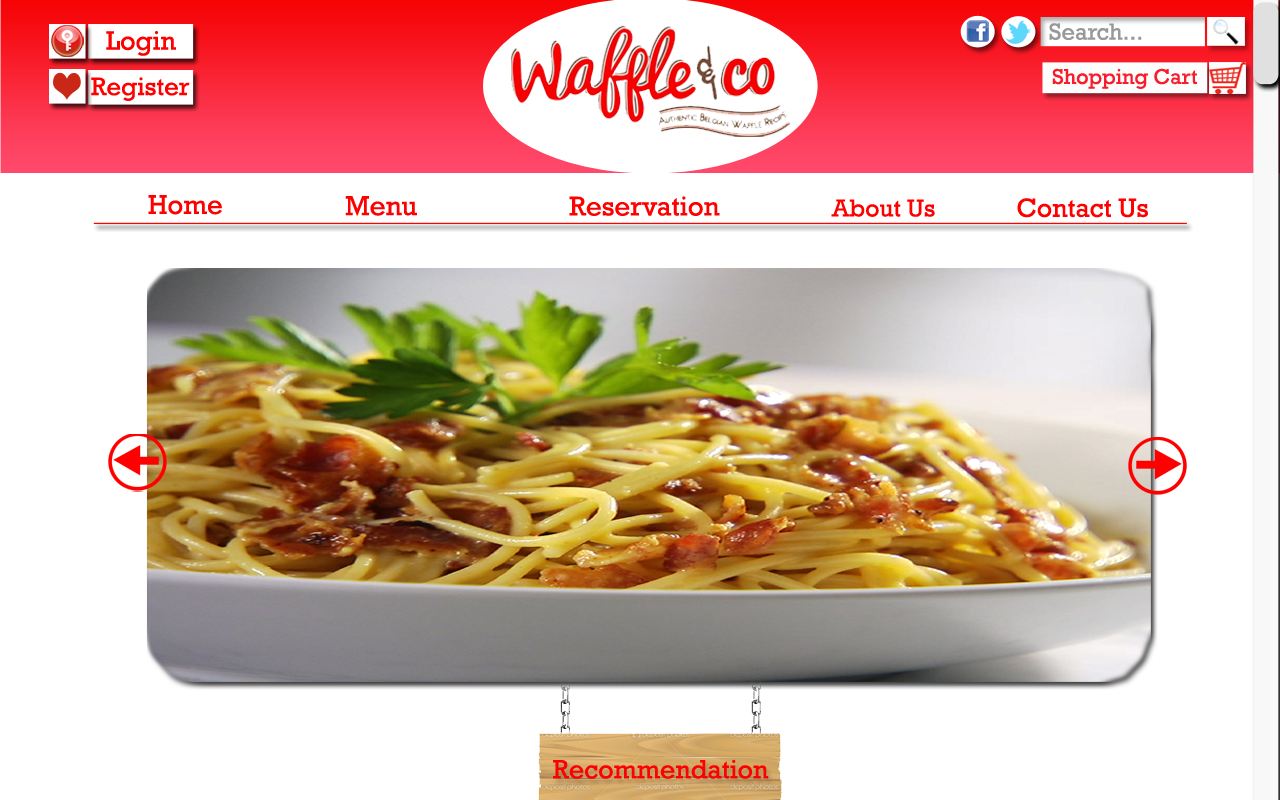
<style>
.page{position:relative;width:1280px;height:800px;background:#ffffff}
.page>*{position:absolute;margin:0}
.t1{font:23.7px "Rockwell";color:#9a9999}
.t2{font:27px "Rockwell";color:#fe0000}
.t3{font:25.6px "Rockwell";color:#fe0000}
.t4{font:21.7px "Rockwell";color:#f91c2a}
.t5{font:27.5px "Rockwell";color:#fe0000}
.t6{font:28px "Rockwell";color:#fe0000}
.t7{font:27.6px "Rockwell";color:#fe0000}
.t8{font:26.7px "Rockwell";color:#fe0000}
.t9{font:24.9px "Rockwell";color:#fe0000}
.t10{font:26.8px "Rockwell";color:#fe0000}
</style>
<div class="page">
<p class="t1" style="left:1049px;top:23px;width:93px;height:17px">Search...</p>
<p class="t2" style="left:106px;top:31px;width:70px;height:25px">Login</p>
<p class="t3" style="left:91px;top:77px;width:99px;height:24px">Register</p>
<p class="t4" style="left:1052px;top:68px;width:145px;height:21px">Shopping Cart</p>
<p class="t5" style="left:148px;top:195px;width:74px;height:20px">Home</p>
<p class="t6" style="left:345px;top:196px;width:72px;height:20px">Menu</p>
<p class="t7" style="left:569px;top:196px;width:151px;height:20px">Reservation</p>
<p class="t8" style="left:1017px;top:198px;width:131px;height:20px">Contact Us</p>
<p class="t9" style="left:831px;top:199px;width:104px;height:18px">About Us</p>
<p class="t10" style="left:553px;top:759px;width:216px;height:20px">Recommendation</p>
</div>
